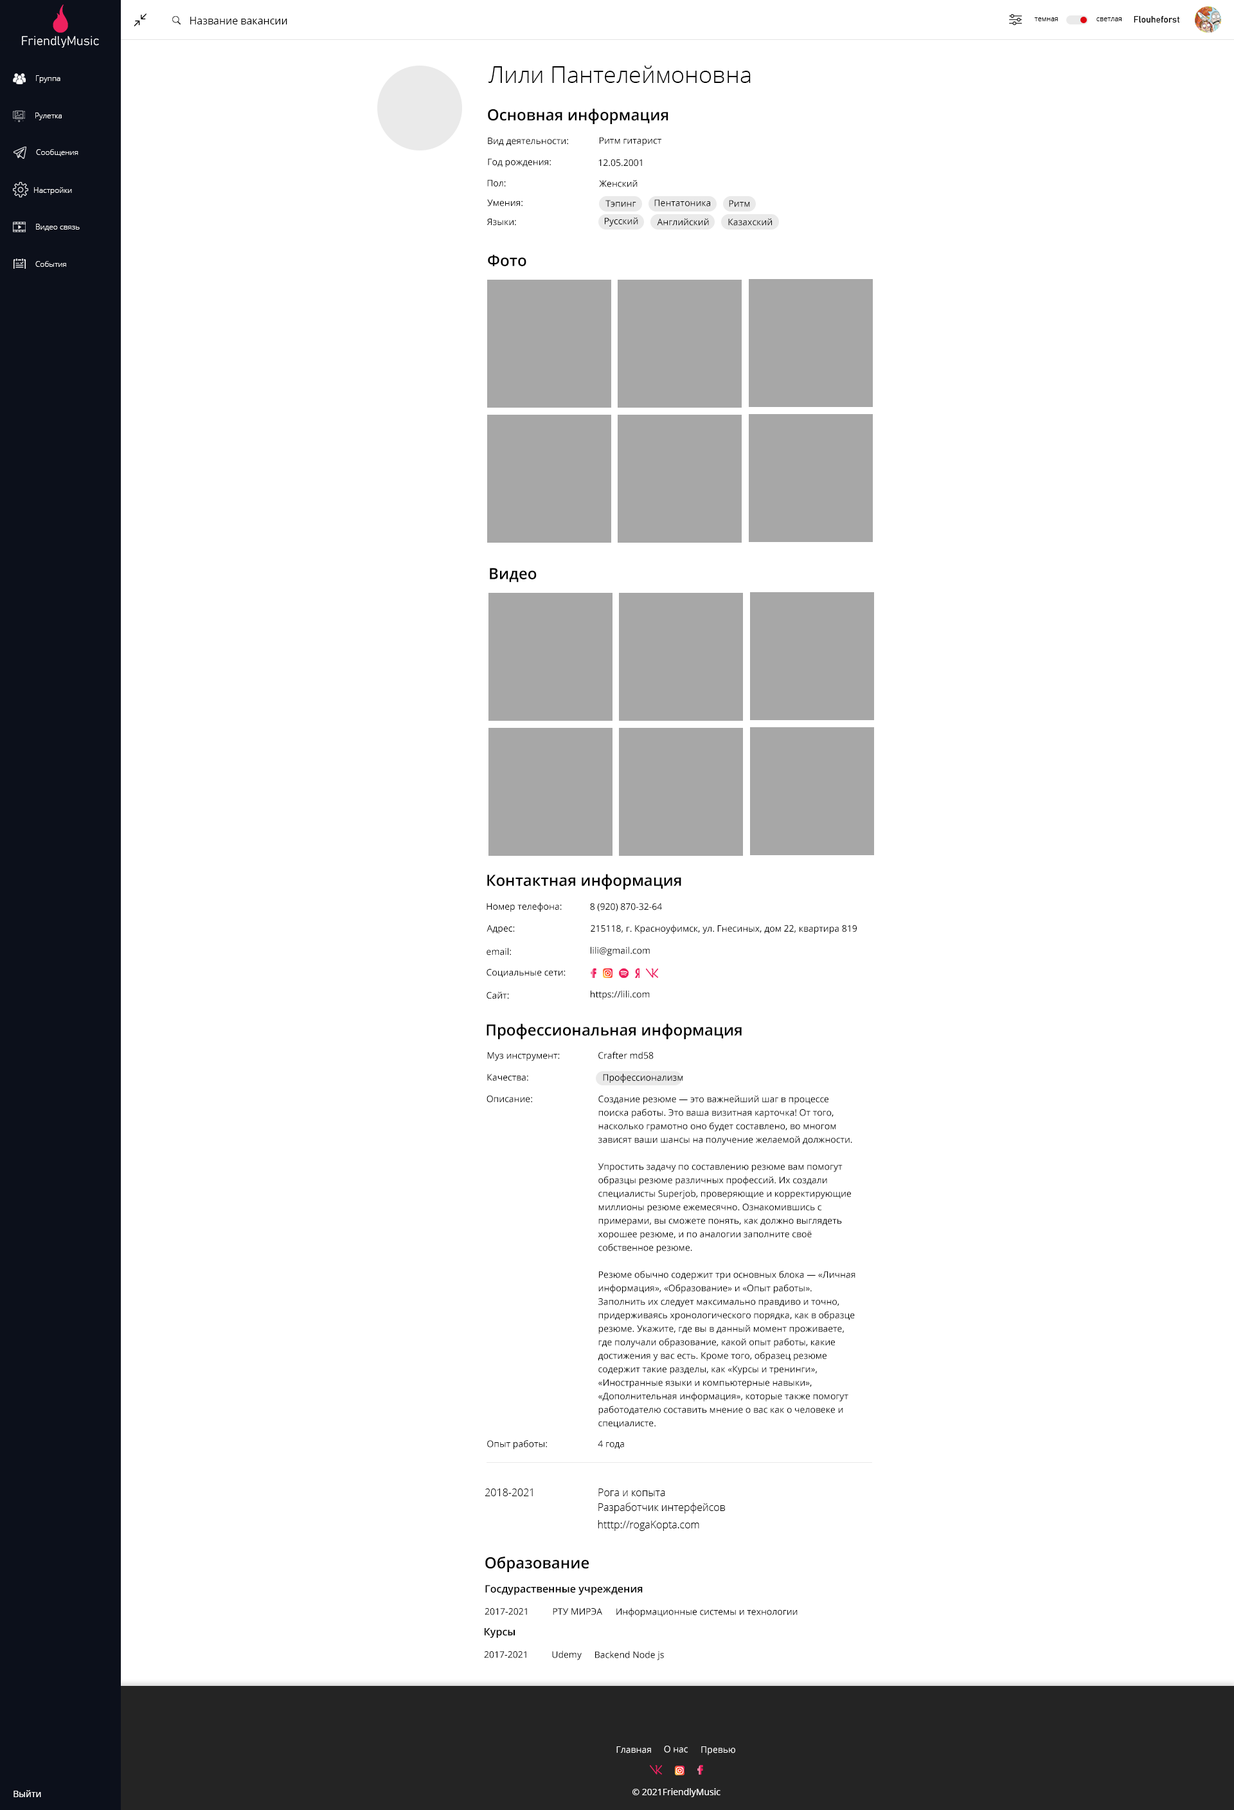
<style>
.page{position:relative;width:1234px;height:1810px;background:#ffffff}
.page>*{position:absolute;margin:0}
.t1{font:10.3px "OpenSans";color:#000000}
.t2{font:7.1px "OpenSans-Light";color:#000000}
.t3{font:9px "Bahnschrift";color:#000000}
.t4{font:23.1px "OpenSans-Light";color:#000000}
.t5{font:7.7px "OpenSans-Light";color:#ffffff}
.t6{font:15.4px "OpenSans-Semibold";color:#000000}
.t7{font:9px "OpenSans";color:#000000}
.t8{font:9px "aakar-medium";color:#000000}
.t9{font:9px/13.5px "OpenSans";color:#000000}
.t10{font:10.3px "OpenSans-Light";color:#000000}
.t11{font:10.3px "OpenSans-Semibold";color:#000000}
.t12{font:9px "aakar-medium";color:#ffffff}
.t13{font:9px "OpenSans";color:#ffffff}
</style>
<div class="page">
<p class="t1" style="left:190px;top:17px;width:97px;height:7px">Название вакансии</p>
<p class="t2" style="left:1034px;top:17px;width:24px;height:4px">темная</p>
<p class="t2" style="left:1097px;top:17px;width:25px;height:4px">светлая</p>
<p class="t3" style="left:1134px;top:15px;width:46px;height:8px">Flouheforst</p>
<p class="t4" style="left:488px;top:66px;width:263px;height:17px">Лили Пантелеймоновна</p>
<p class="t5" style="left:36px;top:75px;width:24px;height:8px">Группа</p>
<p class="t5" style="left:35px;top:113px;width:27px;height:7px">Рулетка</p>
<p class="t6" style="left:488px;top:109px;width:181px;height:15px">Основная информация</p>
<p class="t7" style="left:488px;top:138px;width:80px;height:8px">Вид деятельности:</p>
<p class="t7" style="left:600px;top:137px;width:62px;height:9px">Ритм гитарист</p>
<p class="t5" style="left:36px;top:149px;width:42px;height:7px">Сообщения</p>
<p class="t8" style="left:488px;top:158px;width:63px;height:9px">Год рождения:</p>
<p class="t8" style="left:598px;top:159px;width:44px;height:7px">12.05.2001</p>
<p class="t8" style="left:487px;top:179px;width:19px;height:7px">Пол:</p>
<p class="t8" style="left:599px;top:180px;width:39px;height:7px">Женский</p>
<p class="t5" style="left:34px;top:187px;width:38px;height:8px">Настройки</p>
<p class="t7" style="left:487px;top:199px;width:36px;height:7px">Умения:</p>
<p class="t8" style="left:606px;top:200px;width:30px;height:7px">Тэпинг</p>
<p class="t8" style="left:654px;top:199px;width:56px;height:7px">Пентатоника</p>
<p class="t8" style="left:729px;top:200px;width:21px;height:7px">Ритм</p>
<p class="t8" style="left:487px;top:219px;width:29px;height:7px">Языки:</p>
<p class="t8" style="left:605px;top:217px;width:33px;height:9px">Русский</p>
<p class="t8" style="left:657px;top:218px;width:52px;height:8px">Английский</p>
<p class="t8" style="left:728px;top:218px;width:44px;height:8px">Казахский</p>
<p class="t5" style="left:36px;top:224px;width:44px;height:7px">Видео связь</p>
<p class="t6" style="left:488px;top:255px;width:38px;height:11px">Фото</p>
<p class="t5" style="left:35px;top:261px;width:31px;height:6px">События</p>
<p class="t6" style="left:490px;top:568px;width:47px;height:14px">Видео</p>
<p class="t6" style="left:487px;top:874px;width:194px;height:16px">Контактная информация</p>
<p class="t7" style="left:487px;top:903px;width:75px;height:9px">Номер телефона:</p>
<p class="t7" style="left:590px;top:903px;width:72px;height:9px">8 (920) 870-32-64</p>
<p class="t7" style="left:487px;top:924px;width:28px;height:9px">Адрес:</p>
<p class="t7" style="left:591px;top:924px;width:266px;height:10px">215118, г. Красноуфимск, ул. Гнесиных, дом 22, квартира 819</p>
<p class="t7" style="left:487px;top:948px;width:24px;height:7px">email:</p>
<p class="t7" style="left:591px;top:946px;width:59px;height:10px">lili@gmail.com</p>
<p class="t7" style="left:487px;top:969px;width:79px;height:8px">Социальные сети:</p>
<p class="t7" style="left:487px;top:991px;width:22px;height:8px">Сайт:</p>
<p class="t7" style="left:591px;top:990px;width:59px;height:10px">https://lili.com</p>
<p class="t6" style="left:487px;top:1023px;width:255px;height:17px">Профессиональная информация</p>
<p class="t8" style="left:487px;top:1052px;width:73px;height:9px">Муз инструмент:</p>
<p class="t8" style="left:598px;top:1051px;width:56px;height:8px">Crafter md58</p>
<p class="t8" style="left:487px;top:1074px;width:41px;height:7px">Качества:</p>
<p class="t8" style="left:603px;top:1074px;width:80px;height:9px">Профессионализм</p>
<p class="t8" style="left:487px;top:1095px;width:45px;height:7px">Описание:</p>
<p class="t9" style="left:598px;top:1095px;width:258px;height:333px">Создание резюме — это важнейший шаг в процессе поиска работы. Это ваша визитная карточка! От того, насколько грамотно оно будет составлено, во многом зависят ваши шансы на получение желаемой должности.<br><br>Упростить задачу по составлению резюме вам помогут образцы резюме различных профессий. Их создали специалисты Superjob, проверяющие и корректирующие миллионы резюме ежемесячно. Ознакомившись с примерами, вы сможете понять, как должно выглядеть хорошее резюме, и по аналогии заполните своё собственное резюме.<br><br>Резюме обычно содержит три основных блока — «Личная информация», «Образование» и «Опыт работы». Заполнить их следует максимально правдиво и точно, придерживаясь хронологического порядка, как в образце резюме. Укажите, где вы в данный момент проживаете, где получали образование, какой опыт работы, какие достижения у вас есть. Кроме того, образец резюме содержит такие разделы, как «Курсы и тренинги», «Иностранные языки и компьютерные навыки», «Дополнительная информация», которые также помогут работодателю составить мнение о вас как о человеке и специалисте.</p>
<p class="t8" style="left:487px;top:1439px;width:60px;height:10px">Опыт работы:</p>
<p class="t8" style="left:598px;top:1440px;width:26px;height:8px">4 года</p>
<p class="t10" style="left:485px;top:1488px;width:48px;height:8px">2018-2021</p>
<p class="t10" style="left:598px;top:1488px;width:67px;height:8px">Рога и копыта</p>
<p class="t10" style="left:598px;top:1502px;width:127px;height:11px">Разработчик интерфейсов</p>
<p class="t10" style="left:598px;top:1520px;width:101px;height:11px">htttp://rogaKopta.com</p>
<p class="t6" style="left:485px;top:1556px;width:104px;height:16px">Образование</p>
<p class="t11" style="left:485px;top:1585px;width:158px;height:10px">Госдураственные учреждения</p>
<p class="t8" style="left:485px;top:1608px;width:42px;height:7px">2017-2021</p>
<p class="t8" style="left:553px;top:1608px;width:49px;height:7px">РТУ МИРЭА</p>
<p class="t8" style="left:616px;top:1607px;width:182px;height:10px">Информационные системы и технологии</p>
<p class="t11" style="left:485px;top:1628px;width:30px;height:10px">Курсы</p>
<p class="t8" style="left:484px;top:1651px;width:42px;height:7px">2017-2021</p>
<p class="t8" style="left:552px;top:1650px;width:30px;height:10px">Udemy</p>
<p class="t8" style="left:595px;top:1650px;width:69px;height:10px">Backend Node js</p>
<p class="t12" style="left:664px;top:1745px;width:24px;height:7px">О нас</p>
<p class="t12" style="left:616px;top:1746px;width:35px;height:7px">Главная</p>
<p class="t12" style="left:701px;top:1746px;width:34px;height:9px">Превью</p>
<p class="t13" style="left:14px;top:1790px;width:27px;height:7px">Выйти</p>
<p class="t12" style="left:633px;top:1788px;width:88px;height:9px">© 2021FriendlyMusic</p>
</div>
